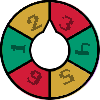
<style>
.page{position:relative;width:100px;height:100px;background:#ffffff}
.page>*{position:absolute;margin:0}
.t1{font:16px "SDS_8x8";color:#765f20}
.t2{font:16px "SDS_8x8";color:#761020}
.t3{font:16px "SDS_8x8";color:#00543d}
</style>
<div class="page">
<p class="t1" style="left:27px;top:14px;width:15px;height:17px;rotate:-27deg">2</p>
<p class="t2" style="left:59px;top:15px;width:15px;height:16px;rotate:26deg">3</p>
<p class="t3" style="left:11px;top:45px;width:15px;height:8px;rotate:-82deg">1</p>
<p class="t3" style="left:75px;top:43px;width:15px;height:12px;rotate:96deg">4</p>
<p class="t2" style="left:27px;top:70px;width:15px;height:15px;rotate:-149deg">6</p>
<p class="t1" style="left:59px;top:69px;width:16px;height:16px;rotate:155deg">5</p>
</div>
